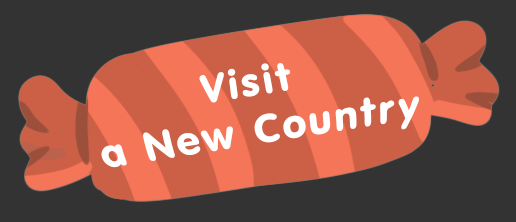
<style>
.page{position:relative;width:516px;height:222px;background:#333333}
.page>*{position:absolute;margin:0}
.t1{font:39.6px "NokiaSansS60-Bold";letter-spacing:0.08em;color:#ffffff}
</style>
<div class="page">
<p class="t1" style="left:101px;top:63px;width:318px;height:105px;text-align:center;rotate:-9deg">Visit <br>a New Country</p>
</div>
